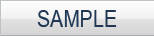
<style>
.page{position:relative;width:154px;height:36px}
.page>*{position:absolute;margin:0}
.t1{font:24px "ArialNarrow";color:#203854}
</style>
<div class="page">
<p class="t1" style="left:37px;top:10px;width:80px;height:17px">SAMPLE</p>
</div>
